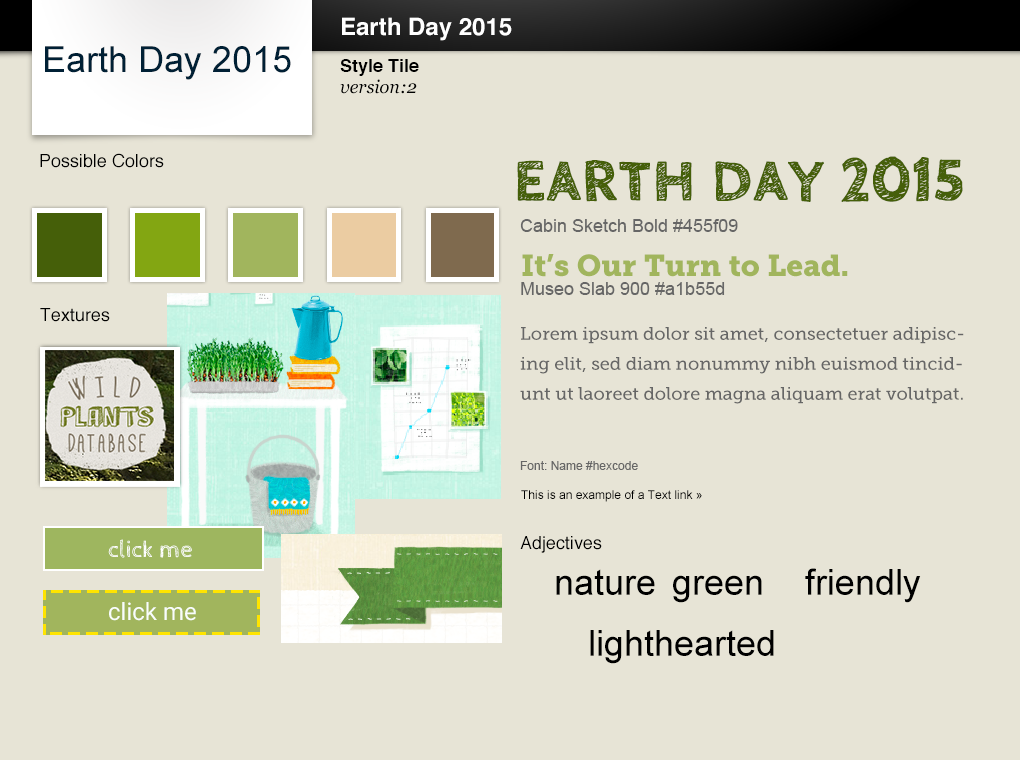
<style>
.page{position:relative;width:1020px;height:760px;background:#e7e4d6}
.page>*{position:absolute;margin:0}
.t1{font:24px "Helvetica-Bold";color:#ffffff}
.t2{font:36px "ArialMT";color:#002035}
.t3{font:18px "Helvetica-Bold";color:#000000}
.t4{font:18px "Georgia-Italic";color:#000000}
.t5{font:18px "Helvetica";color:#000000}
.t6{font:60px "CabinSketch-Bold";color:#455f09;font-weight:bold}
.t7{font:18px "ArialMT";color:#666666}
.t8{font:30px "MuseoSlab-900";color:#a1b55d}
.t9{font:18px/30px "MuseoSlab-500";color:#666666}
.t10{font:12px "ArialMT";color:#666666}
.t11{font:12px "ArialMT";color:#000000}
.t12{font:24px "CabinSketch-Regular";color:#ffffff}
.t13{font:36px "ArialMT";color:#000000}
.t14{font:24px "Roboto-Regular";color:#f9fdfc}
</style>
<div class="page">
<p class="t1" style="left:342px;top:17px;width:170px;height:24px">Earth Day 2015</p>
<p class="t2" style="left:45px;top:46px;width:246px;height:34px">Earth Day 2015</p>
<p class="t3" style="left:340px;top:59px;width:79px;height:17px">Style Tile</p>
<p class="t4" style="left:340px;top:79px;width:77px;height:15px">version:2</p>
<p class="t5" style="left:40px;top:153px;width:124px;height:15px">Possible Colors</p>
<p class="t6" style="left:517px;top:156px;width:446px;height:46px">EARTH DAY 2015</p>
<p class="t7" style="left:520px;top:219px;width:218px;height:13px">Cabin Sketch Bold #455f09</p>
<p class="t8" style="left:522px;top:254px;width:326px;height:23px">It’s Our Turn to Lead.</p>
<p class="t7" style="left:521px;top:282px;width:204px;height:13px">Museo Slab 900 #a1b55d</p>
<p class="t5" style="left:40px;top:308px;width:70px;height:14px">Textures</p>
<p class="t9" style="left:520px;top:327px;width:444px;height:77px">Lorem ipsum dolor sit amet, consectetuer adipiscing elit, sed diam nonummy nibh euismod tincidunt ut laoreet dolore magna aliquam erat volutpat.</p>
<p class="t10" style="left:520px;top:461px;width:118px;height:9px">Font: Name #hexcode</p>
<p class="t11" style="left:521px;top:490px;width:181px;height:12px">This is an example of a Text link »</p>
<p class="t12" style="left:108px;top:539px;width:84px;height:19px">click me</p>
<p class="t5" style="left:520px;top:536px;width:82px;height:17px">Adjectives</p>
<p class="t13" style="left:556px;top:569px;width:99px;height:26px">nature</p>
<p class="t13" style="left:805px;top:568px;width:116px;height:35px">friendly</p>
<p class="t13" style="left:673px;top:575px;width:89px;height:28px">green</p>
<p class="t14" style="left:109px;top:602px;width:87px;height:19px">click me</p>
<p class="t13" style="left:590px;top:630px;width:184px;height:34px">lighthearted</p>
</div>
